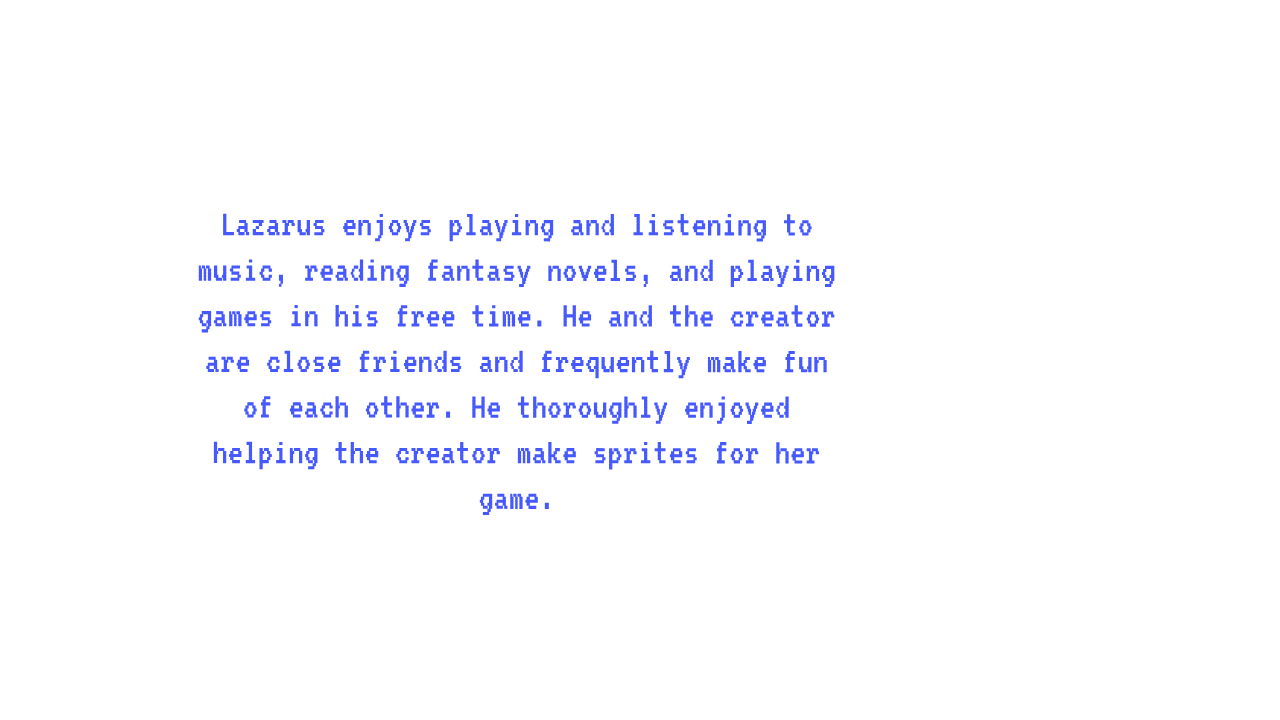
<style>
.page{position:relative;width:1280px;height:720px;background:#ffffff}
.page>*{position:absolute;margin:0}
.t1{font:38px "VT323-Regular";color:#4659ff}
</style>
<div class="page">
<p class="t1" style="left:198px;top:213px;width:637px;height:302px;text-align:center">Lazarus enjoys playing and listening to music, reading fantasy novels, and playing games in his free time. He and the creator are close friends and frequently make fun of each other. He thoroughly enjoyed helping the creator make sprites for her game.</p>
</div>
